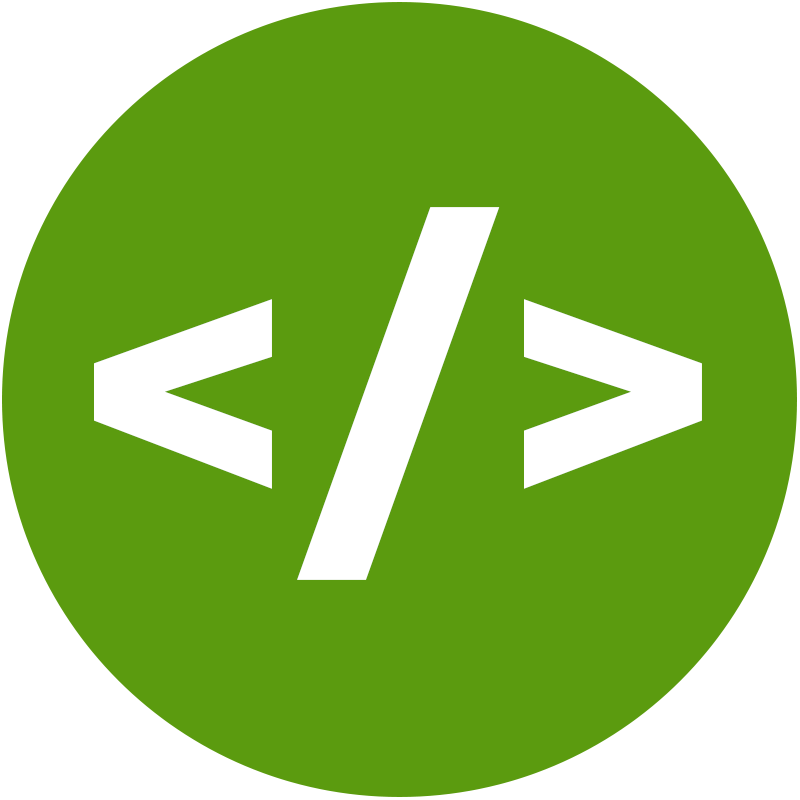
<style>
.page{position:relative;width:800px;height:800px;background:#5b9b0f}
.page>*{position:absolute;margin:0}
.t1{font:442.7px "Exo-Bold";color:#ffffff;scale:1.07 1}
</style>
<div class="page">
<p class="t1" style="left:94px;top:207px;width:608px;height:373px">&lt;/&gt;</p>
</div>
